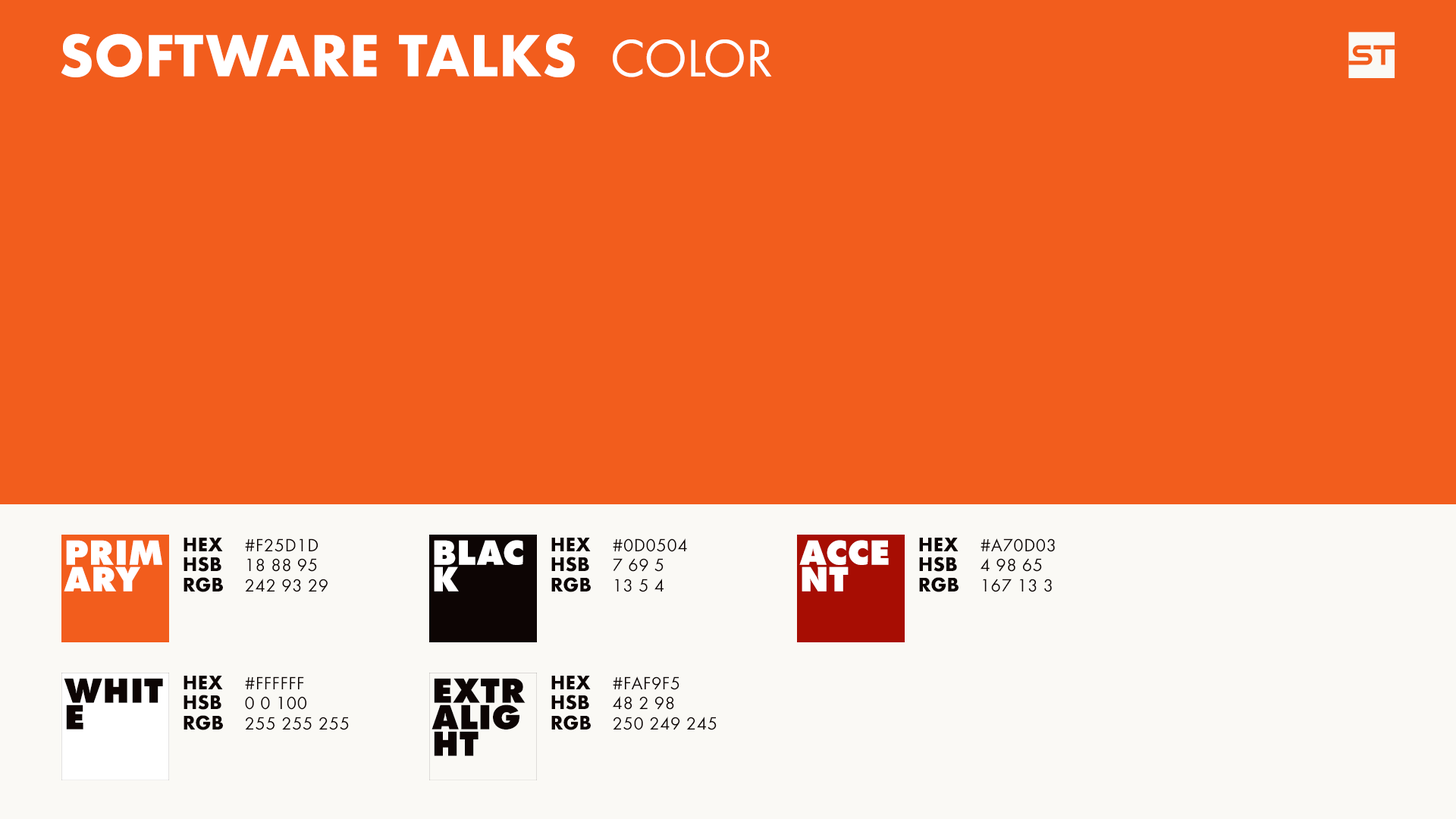
<style>
.page{position:relative;width:1456px;height:819px;background:#f25d1d}
.page>*{position:absolute;margin:0}
.t1{font:54.6px "Futura-Bold";color:#ffffff;text-transform:uppercase}
.t2{font:54.6px "Futura-Book";color:#ffffff;text-transform:uppercase}
.t3{font:36.4px/26.5px "Futura-ExtraBold";color:#ffffff;text-transform:uppercase}
.t4{font:18.2px "Futura-Bold";color:#0d0504;text-transform:uppercase}
.t5{font:18.2px "Futura-Book";letter-spacing:0.03em;color:#0d0504;text-transform:uppercase}
.t6{font:36.4px/26.5px "Futura-ExtraBold";color:#0d0504;text-transform:uppercase}
</style>
<div class="page">
<p class="t1" style="left:61px;top:33px;width:514px;height:44px">Software Talks</p>
<p class="t2" style="left:613px;top:39px;width:159px;height:38px">Color</p>
<p class="t3" style="left:64px;top:540px;width:98px;height:51px">Prim<br>ary</p>
<p class="t4" style="left:184px;top:538px;width:39px;height:13px">HEX</p>
<p class="t5" style="left:245px;top:538px;width:73px;height:14px">#f25d1d</p>
<p class="t3" style="left:434px;top:540px;width:89px;height:51px">blac<br>k</p>
<p class="t4" style="left:551px;top:538px;width:40px;height:13px">HEX</p>
<p class="t5" style="left:613px;top:538px;width:74px;height:14px">#0d0504</p>
<p class="t3" style="left:799px;top:540px;width:90px;height:51px">Acce<br>nt</p>
<p class="t4" style="left:919px;top:538px;width:40px;height:13px">HEX</p>
<p class="t5" style="left:981px;top:538px;width:74px;height:14px">#a70d03</p>
<p class="t4" style="left:184px;top:557px;width:37px;height:15px">HSB</p>
<p class="t4" style="left:551px;top:557px;width:38px;height:15px">HSB</p>
<p class="t4" style="left:919px;top:557px;width:38px;height:15px">HSB</p>
<p class="t5" style="left:247px;top:558px;width:70px;height:14px">18 88 95</p>
<p class="t5" style="left:613px;top:558px;width:51px;height:14px">7 69 5</p>
<p class="t5" style="left:980px;top:558px;width:62px;height:14px">4 98 65</p>
<p class="t4" style="left:184px;top:577px;width:39px;height:15px">RGB</p>
<p class="t5" style="left:245px;top:579px;width:83px;height:13px">242 93 29</p>
<p class="t4" style="left:551px;top:577px;width:40px;height:15px">RGB</p>
<p class="t5" style="left:615px;top:579px;width:49px;height:13px">13 5 4</p>
<p class="t4" style="left:919px;top:577px;width:40px;height:15px">RGB</p>
<p class="t5" style="left:983px;top:579px;width:69px;height:13px">167 13 3</p>
<p class="t6" style="left:64px;top:678px;width:99px;height:52px">Whit<br>e</p>
<p class="t4" style="left:184px;top:676px;width:39px;height:13px">HEX</p>
<p class="t5" style="left:245px;top:676px;width:59px;height:14px">#ffffff</p>
<p class="t6" style="left:431px;top:678px;width:95px;height:78px">Extr<br>alig<br>ht</p>
<p class="t4" style="left:551px;top:676px;width:40px;height:13px">HEX</p>
<p class="t5" style="left:613px;top:676px;width:66px;height:14px">#faf9f5</p>
<p class="t4" style="left:184px;top:695px;width:37px;height:15px">HSB</p>
<p class="t5" style="left:245px;top:696px;width:61px;height:14px">0 0 100</p>
<p class="t4" style="left:551px;top:695px;width:38px;height:15px">HSB</p>
<p class="t5" style="left:612px;top:696px;width:62px;height:14px">48 2 98</p>
<p class="t4" style="left:184px;top:715px;width:39px;height:15px">RGB</p>
<p class="t5" style="left:245px;top:717px;width:104px;height:13px">255 255 255</p>
<p class="t4" style="left:551px;top:715px;width:40px;height:15px">RGB</p>
<p class="t5" style="left:613px;top:717px;width:104px;height:13px">250 249 245</p>
</div>
